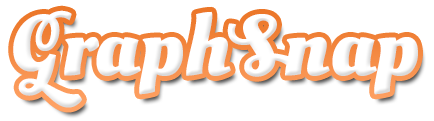
<style>
.page{position:relative;width:434px;height:121px;background:#ffffff}
.page>*{position:absolute;margin:0}
.t1{font:86px "OleoScriptSwashCaps-Bold";color:#ffffff}
</style>
<div class="page">
<p class="t1" style="left:13px;top:10px;width:405px;height:98px">GraphSnap</p>
</div>
